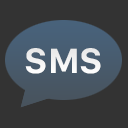
<style>
.page{position:relative;width:128px;height:128px;background:#333333}
.page>*{position:absolute;margin:0}
.t1{font:34.6px "SFUIText-Bold";color:#ffffff;text-transform:uppercase}
</style>
<div class="page">
<p class="t1" style="left:25px;top:48px;width:76px;height:26px">sms</p>
</div>
